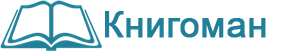
<style>
.page{position:relative;width:300px;height:56px;background:#ffffff}
.page>*{position:absolute;margin:0}
.t1{font:36px "ArialMT";color:#218099;font-weight:bold}
</style>
<div class="page">
<p class="t1" style="left:105px;top:11px;width:161px;height:27px">Книгоман</p>
</div>
